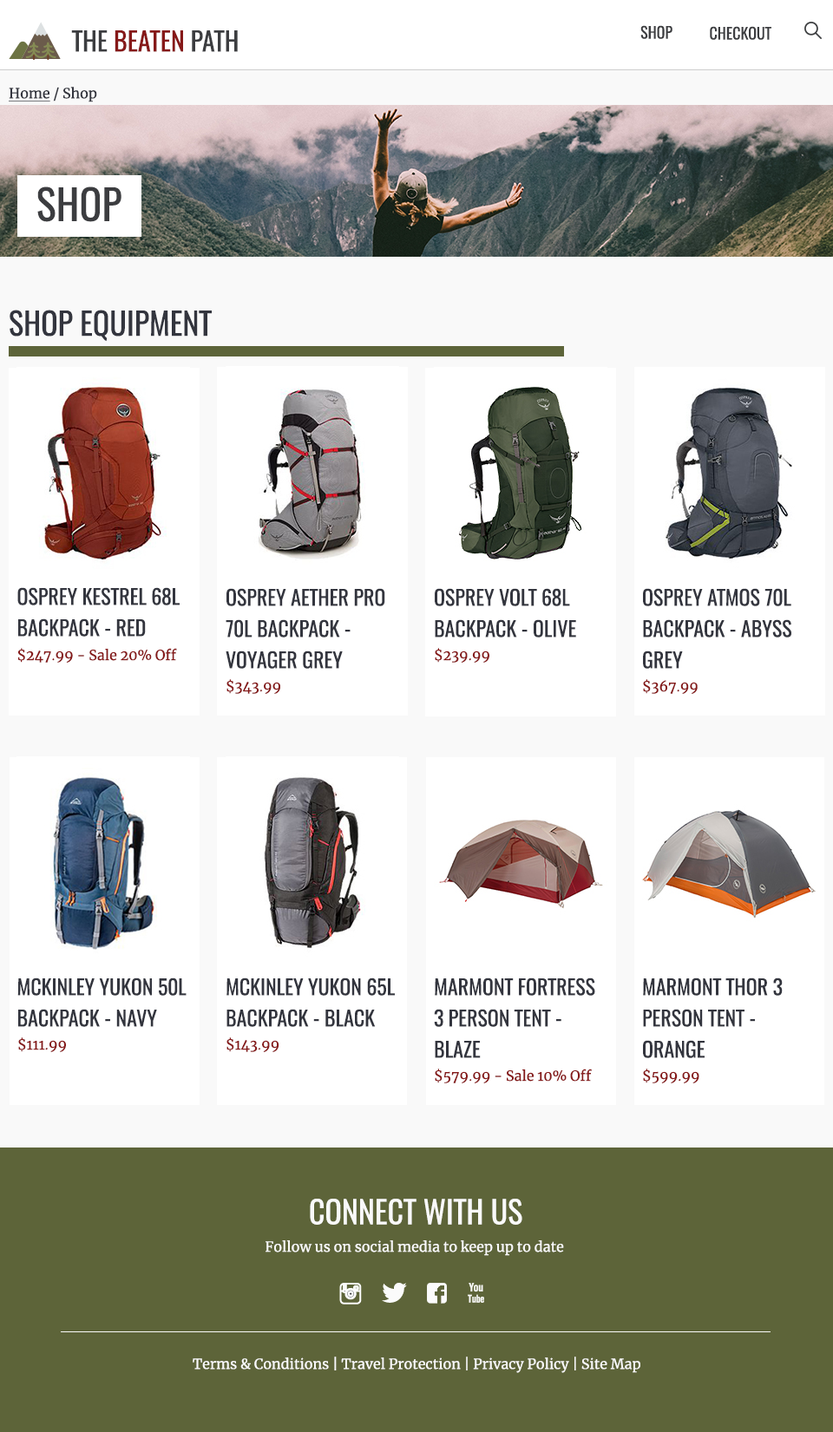
<style>
.page{position:relative;width:833px;height:1432px;background:#ffffff}
.page>*{position:absolute;margin:0}
.t1{font:15.6px "Oswald-Regular";color:#3c3d40;text-transform:uppercase}
.t2{font:26px "Oswald-Regular";color:#861919;text-transform:uppercase}
.t3{font:26px "Oswald-Regular";color:#3c3d40;text-transform:uppercase}
.t4{font:13.9px "Merriweather-Regular";color:#33353e}
.t5{font:13.9px "Merriweather-Regular";color:#33353e;text-decoration:underline}
.t6{font:41.6px "Oswald-Regular";color:#3c3d40;text-transform:uppercase}
.t7{font:31.2px "Oswald-Regular";color:#33353e;text-transform:uppercase}
.t8{font:20.8px/31.2px "Oswald-Regular";color:#33353e;text-transform:uppercase}
.t9{font:13.9px "Merriweather-Regular";color:#861919}
.t10{font:31.2px "Oswald-Regular";color:#f9f9f9;text-transform:uppercase}
.t11{font:13.9px "Merriweather-Regular";color:#f9f9f9}
</style>
<div class="page">
<p class="t1" style="left:640px;top:25px;width:32px;height:14px">Shop</p>
<p class="t1" style="left:710px;top:26px;width:61px;height:14px">Checkout</p>
<p class="t2" style="left:71px;top:30px;width:167px;height:22px"><span class="t3">The</span> Beaten <span class="t3">Path</span></p>
<p class="t4" style="left:9px;top:87px;width:88px;height:15px"><span class="t5">Home</span> / Shop</p>
<p class="t6" style="left:37px;top:186px;width:84px;height:36px">Shop</p>
<p class="t7" style="left:10px;top:310px;width:202px;height:32px">Shop Equipment</p>
<p class="t8" style="left:17px;top:587px;width:163px;height:50px">Osprey kestrel 68L Backpack - Red</p>
<p class="t8" style="left:226px;top:588px;width:159px;height:81px">Osprey Aether Pro 70L Backpack - Voyager Grey</p>
<p class="t8" style="left:435px;top:588px;width:141px;height:50px">Osprey Volt 68L Backpack - olive</p>
<p class="t8" style="left:643px;top:588px;width:148px;height:81px">Osprey Atmos 70L Backpack - Abyss Grey</p>
<p class="t9" style="left:18px;top:648px;width:159px;height:15px">$247.99 - Sale 20% Off</p>
<p class="t9" style="left:435px;top:648px;width:54px;height:15px">$239.99</p>
<p class="t9" style="left:226px;top:679px;width:54px;height:15px">$343.99</p>
<p class="t9" style="left:643px;top:679px;width:54px;height:15px">$367.99</p>
<p class="t8" style="left:17px;top:978px;width:169px;height:49px">McKinley Yukon 50L Backpack - Navy</p>
<p class="t8" style="left:226px;top:978px;width:169px;height:49px">McKinley Yukon 65L Backpack - Black</p>
<p class="t8" style="left:434px;top:978px;width:161px;height:80px">Marmont Fortress  3 Person Tent - Blaze</p>
<p class="t8" style="left:643px;top:978px;width:139px;height:80px">Marmont Thor 3 Person Tent - Orange</p>
<p class="t9" style="left:18px;top:1037px;width:48px;height:15px">$111.99</p>
<p class="t9" style="left:226px;top:1037px;width:53px;height:15px">$143.99</p>
<p class="t9" style="left:435px;top:1069px;width:157px;height:14px">$579.99 - Sale 10% Off</p>
<p class="t9" style="left:643px;top:1069px;width:56px;height:14px">$599.99</p>
<p class="t10" style="left:310px;top:1199px;width:212px;height:26px">Connect With Us</p>
<p class="t11" style="left:265px;top:1240px;width:299px;height:16px">Follow us on social media to keep up to date</p>
<p class="t11" style="left:193px;top:1357px;width:447px;height:16px">Terms &amp; Conditions | Travel Protection | Privacy Policy | Site Map</p>
</div>
